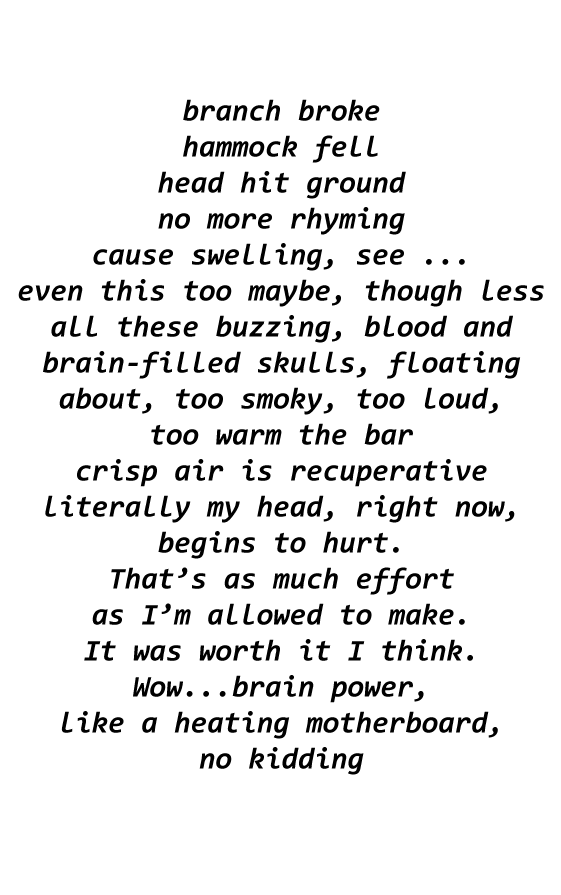
<style>
.page{position:relative;width:561px;height:895px;background:#ffffff}
.page>*{position:absolute;margin:0}
.t1{font:30px "Consolas-BoldItalic";color:#000000}
</style>
<div class="page">
<p class="t1" style="left:18px;top:99px;width:526px;height:676px;text-align:center">branch broke<br>hammock fell<br>head hit ground<br>no more rhyming<br>cause swelling, see ...<br>even this too maybe, though less<br>all these buzzing, blood and<br>brain-filled skulls, floating<br>about, too smoky, too loud,<br>too warm the bar<br>crisp air is recuperative<br>literally my head, right now,<br>begins to hurt.<br>That’s as much effort<br>as I’m allowed to make.<br>It was worth it I think.<br>Wow...brain power,<br>like a heating motherboard,<br>no kidding</p>
</div>
